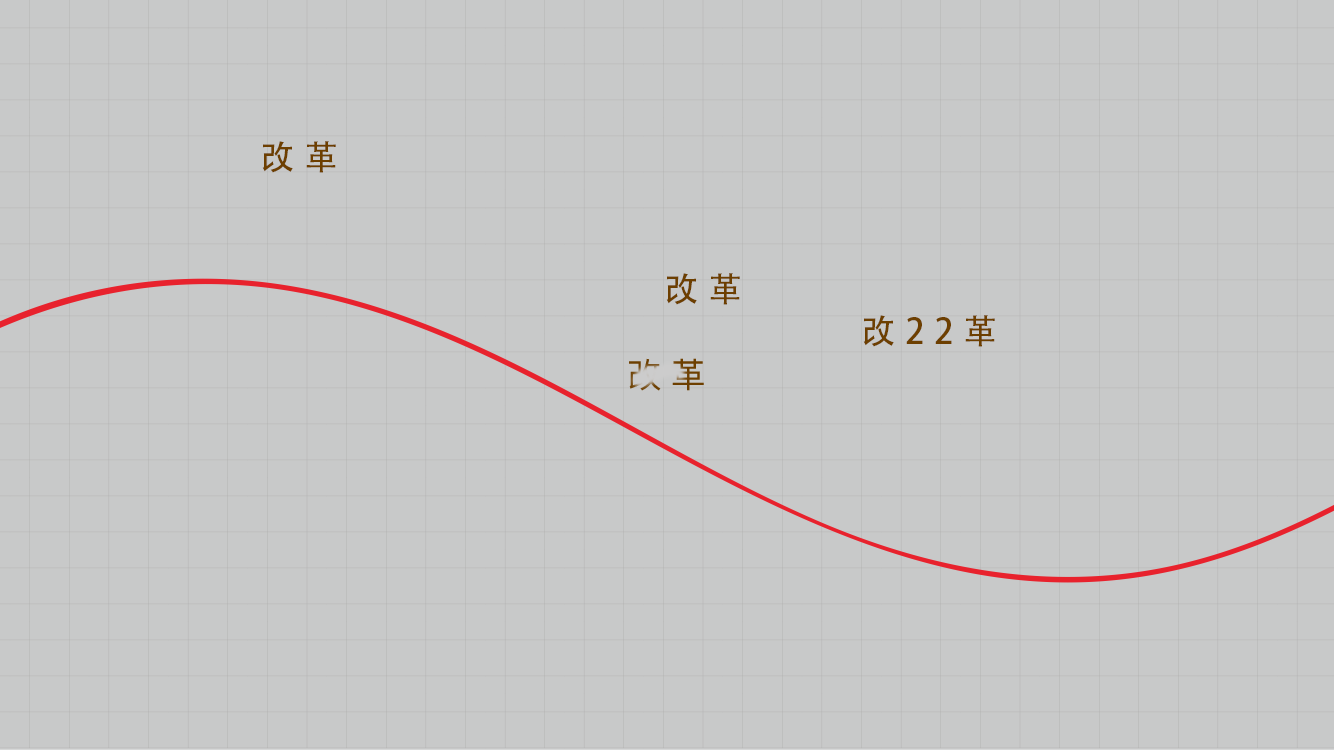
<style>
.page{position:relative;width:1334px;height:750px;background:#c8c9c9}
.page>*{position:absolute;margin:0}
.t1{font:34.4px "AdobeHeitiStd-Regular";letter-spacing:0.28em;color:#6d3f00}
</style>
<div class="page">
<p class="t1" style="left:262px;top:141px;width:74px;height:32px">改革</p>
<p class="t1" style="left:666px;top:273px;width:74px;height:32px">改革</p>
<p class="t1" style="left:863px;top:315px;width:132px;height:32px">改22革</p>
</div>
